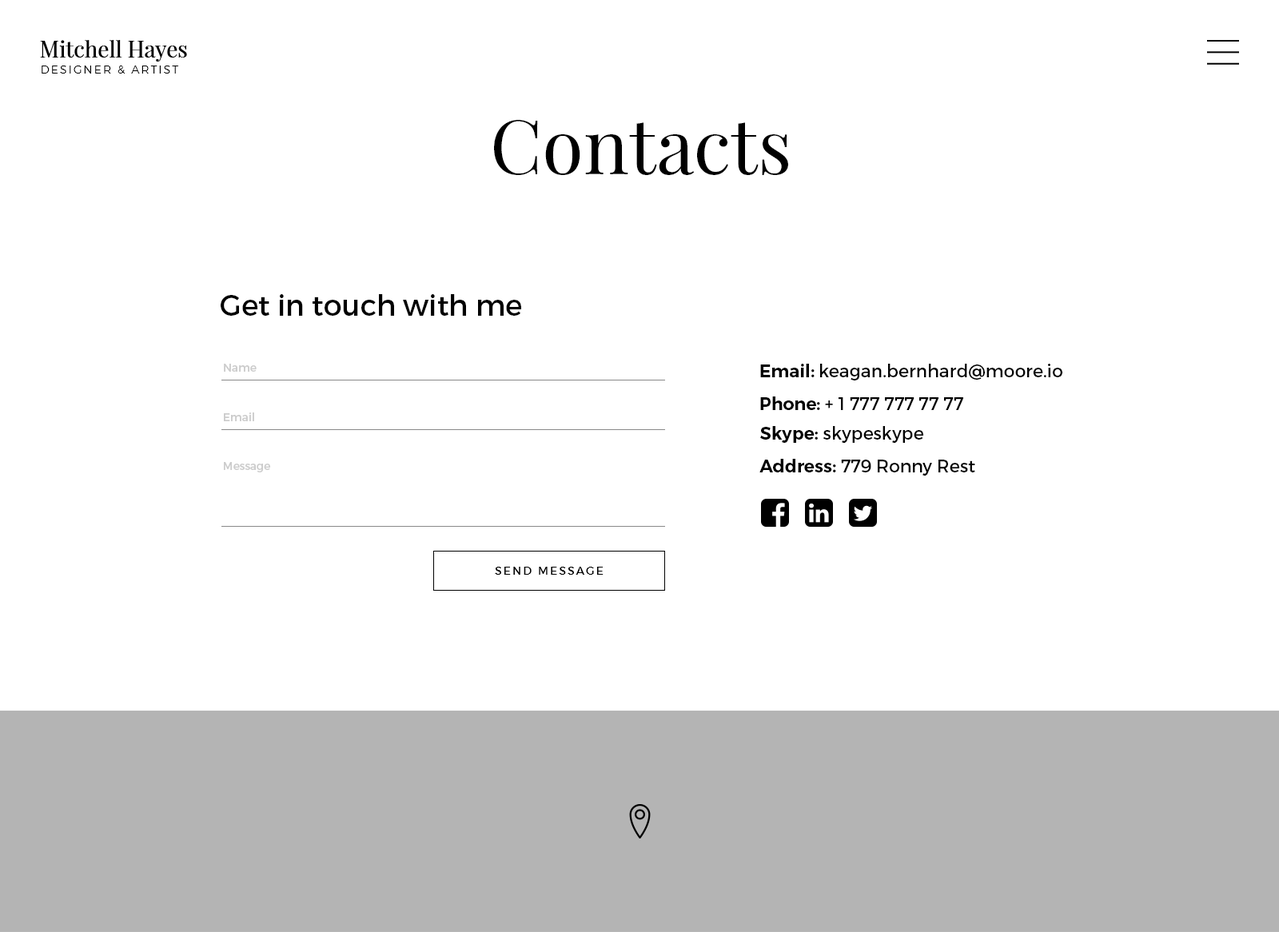
<style>
.page{position:relative;width:1279px;height:932px;background:#ffffff}
.page>*{position:absolute;margin:0}
.t1{font:22.4px "PlayfairDisplay-Regular";color:#000000}
.t2{font:11.2px "Montserrat-Light";letter-spacing:0.15em;color:#000000}
.t3{font:76px "PlayfairDisplay-Regular";color:#000000}
.t4{font:28.8px "Montserrat-Regular";color:#010101}
.t5{font:11.2px "Montserrat-Regular";color:#cccccc}
.t6{font:17.6px "Montserrat-Regular";color:#000000}
.t7{font:17.6px "Montserrat-SemiBold";color:#000000}
.t8{font:11.2px "Montserrat-Regular";letter-spacing:0.15em;color:#000000}
</style>
<div class="page">
<p class="t1" style="left:40px;top:40px;width:147px;height:22px">Mitchell Hayes</p>
<p class="t2" style="left:42px;top:66px;width:136px;height:8px">DESIGNER &amp; ARTIST</p>
<p class="t3" style="left:494px;top:120px;width:294px;height:55px">Contacts</p>
<p class="t4" style="left:221px;top:294px;width:300px;height:22px">Get in touch with me</p>
<p class="t5" style="left:224px;top:364px;width:33px;height:8px">Name</p>
<p class="t6" style="left:760px;top:364px;width:303px;height:17px"><span class="t7">Email: </span>keagan.bernhard@moore.io</p>
<p class="t6" style="left:760px;top:397px;width:203px;height:13px"><span class="t7">Phone:</span> + 1 777 777 77 77</p>
<p class="t5" style="left:224px;top:413px;width:30px;height:8px">Email</p>
<p class="t6" style="left:760px;top:426px;width:163px;height:17px"><span class="t7">Skype:</span> skypeskype</p>
<p class="t6" style="left:760px;top:459px;width:215px;height:17px"><span class="t7">Address: </span>779 Ronny Rest</p>
<p class="t5" style="left:224px;top:462px;width:46px;height:10px">Message</p>
<p class="t8" style="left:495px;top:567px;width:109px;height:8px">SEND MESSAGE</p>
</div>
